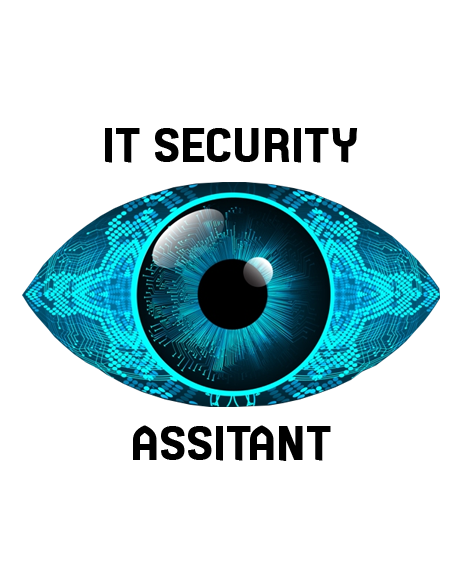
<style>
.page{position:relative;width:465px;height:577px;background:#ffffff}
.page>*{position:absolute;margin:0}
.t1{font:48px "Technoma";letter-spacing:0.05em;color:#000000}
</style>
<div class="page">
<p class="t1" style="left:105px;top:128px;width:253px;height:35px">IT SECURITY</p>
<p class="t1" style="left:133px;top:425px;width:198px;height:36px">ASSITANT</p>
</div>
